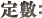
<style>
.page{position:relative;width:42px;height:18px;background:#ffffff}
.page>*{position:absolute;margin:0}
.t1{font:18px "RyuminPr6N-ExBold";font-weight:bold}
</style>
<div class="page">
<p class="t1" style="left:0px;top:0px;width:37px;height:18px">定數</p>
</div>
